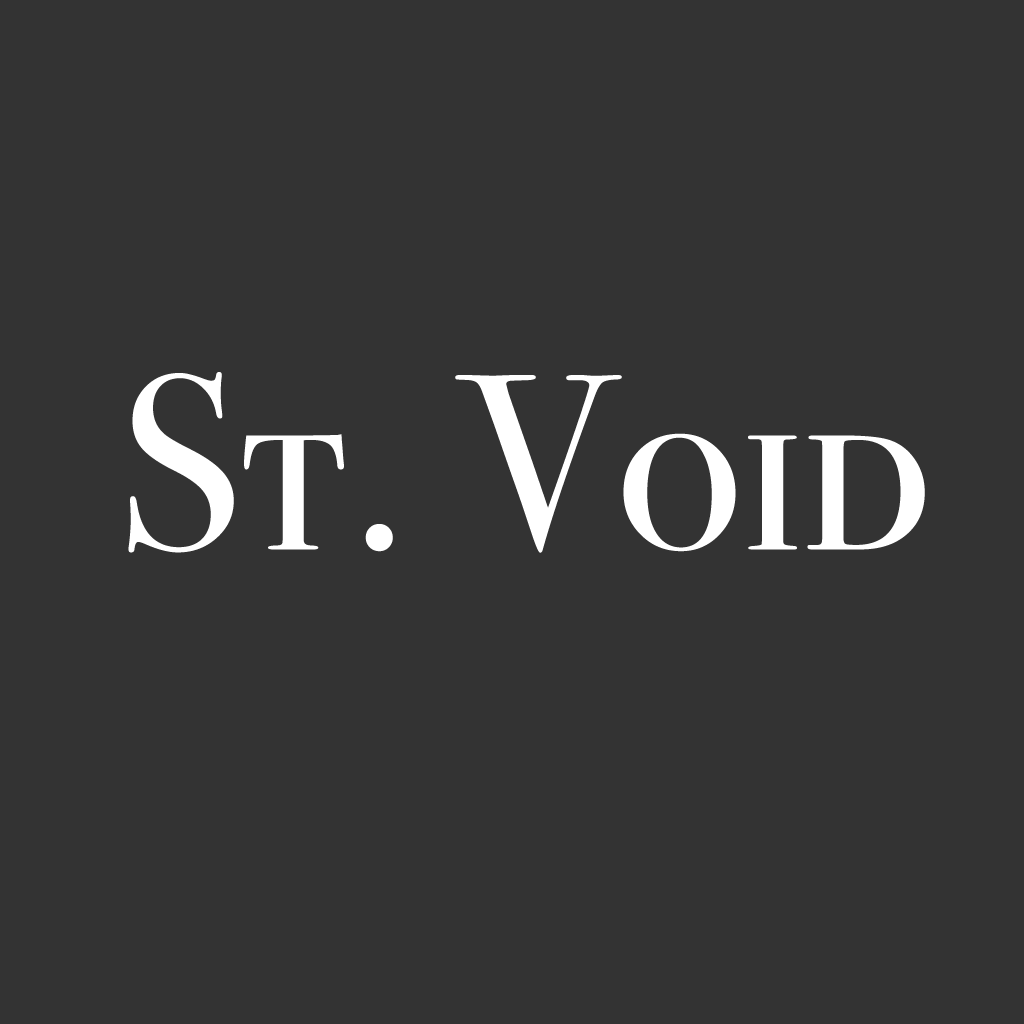
<style>
.page{position:relative;width:1024px;height:1024px;background:#333333}
.page>*{position:absolute;margin:0}
.t1{font:250px "BodoniSvtyTwoSCITCTT-Book";color:#ffffff}
</style>
<div class="page">
<p class="t1" style="left:128px;top:372px;width:797px;height:181px">St. Void</p>
</div>
